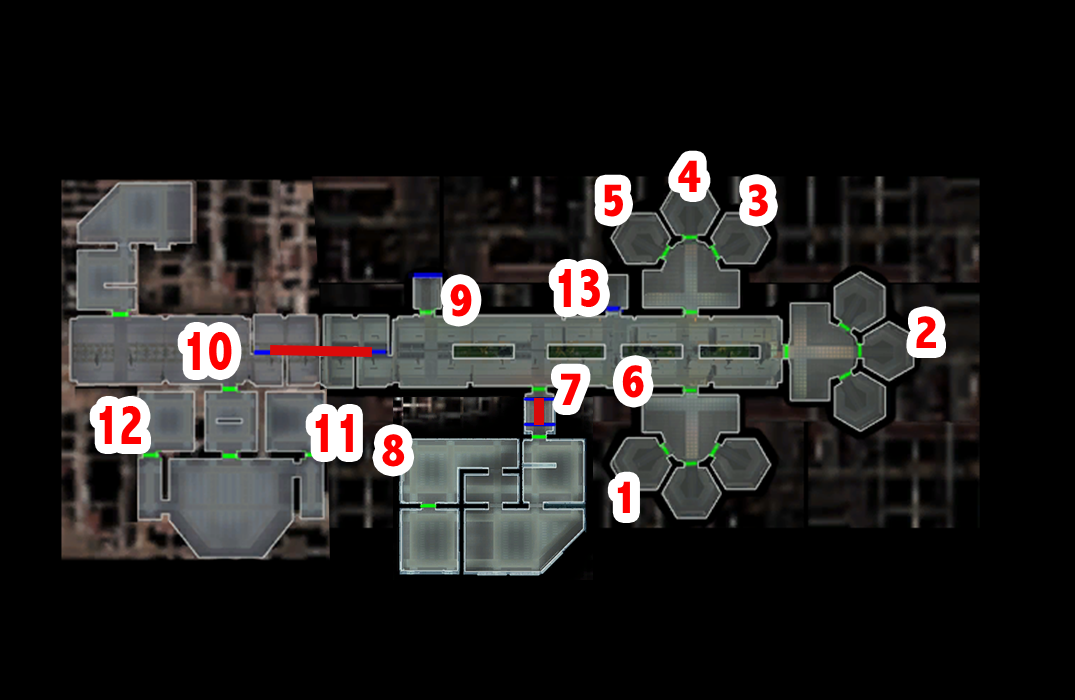
<style>
.page{position:relative;width:1075px;height:700px;background:#000000}
.page>*{position:absolute;margin:0}
.t1{font:48px "AbadiMT-CondensedExtraBold";color:#ff0000}
.t2{font:58.1px "AbadiMT-CondensedExtraBold";color:#ff0000;scale:0.83 1}
</style>
<div class="page">
<p class="t1" style="left:678px;top:160px;width:23px;height:32px">4</p>
<p class="t1" style="left:604px;top:184px;width:19px;height:33px">5</p>
<p class="t1" style="left:749px;top:184px;width:19px;height:33px">3</p>
<p class="t2" style="left:558px;top:269px;width:42px;height:38px">13</p>
<p class="t1" style="left:450px;top:284px;width:22px;height:33px">9</p>
<p class="t1" style="left:916px;top:316px;width:20px;height:32px">2</p>
<p class="t2" style="left:187px;top:332px;width:45px;height:38px">10</p>
<p class="t1" style="left:622px;top:365px;width:22px;height:33px">6</p>
<p class="t1" style="left:561px;top:373px;width:20px;height:32px">7</p>
<p class="t2" style="left:99px;top:406px;width:42px;height:38px">12</p>
<p class="t2" style="left:315px;top:414px;width:38px;height:38px">11</p>
<p class="t1" style="left:382px;top:434px;width:23px;height:33px">8</p>
<p class="t1" style="left:617px;top:481px;width:13px;height:32px">1</p>
</div>
